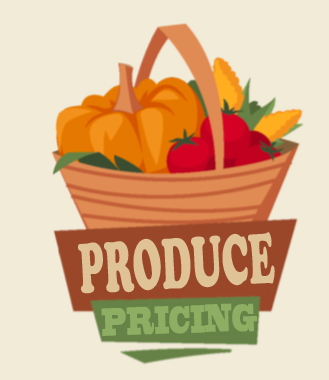
<style>
.page{position:relative;width:329px;height:380px;background:#f1ebd8}
.page>*{position:absolute;margin:0}
.t1{font:74px "CooperBlack";color:#dfc295;scale:0.5 1}
.t2{font:36.8px "BlackoakStd";color:#8eae64;scale:0.37 1}
</style>
<div class="page">
<p class="t1" style="left:78px;top:232px;width:197px;height:62px;rotate:-3deg">PRODUCE</p>
<p class="t2" style="left:101px;top:303px;width:156px;height:33px;rotate:-2deg">PRICING</p>
</div>
